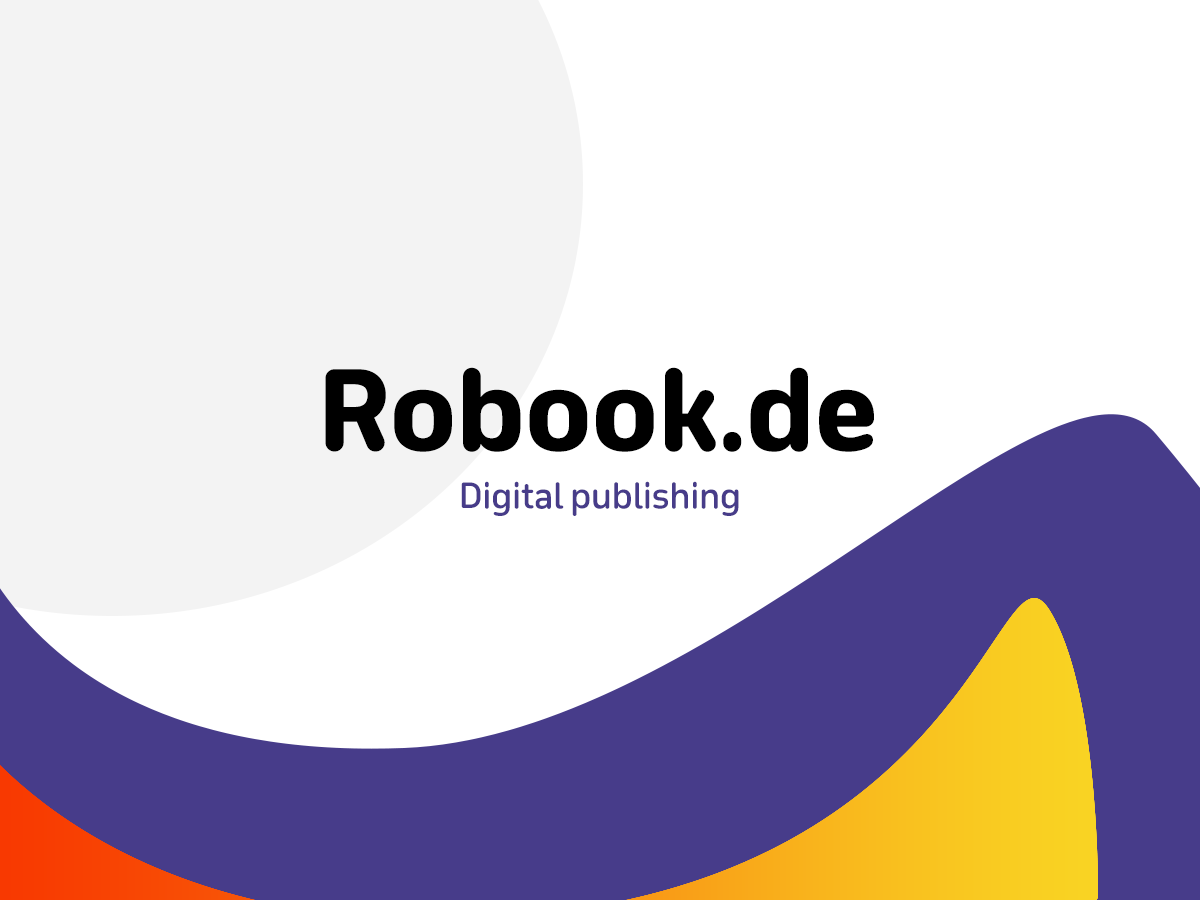
<style>
.page{position:relative;width:1200px;height:900px;background:#ffffff}
.page>*{position:absolute;margin:0}
.t1{font:106.8px "TeshrinAR+LT-Heavy";color:#000000}
.t2{font:33.8px "TeshrinAR+LT-Medium";color:#473c89}
</style>
<div class="page">
<p class="t1" style="left:325px;top:367px;width:549px;height:85px">Robook.de</p>
<p class="t2" style="left:461px;top:481px;width:278px;height:35px">Digital publishing</p>
</div>
